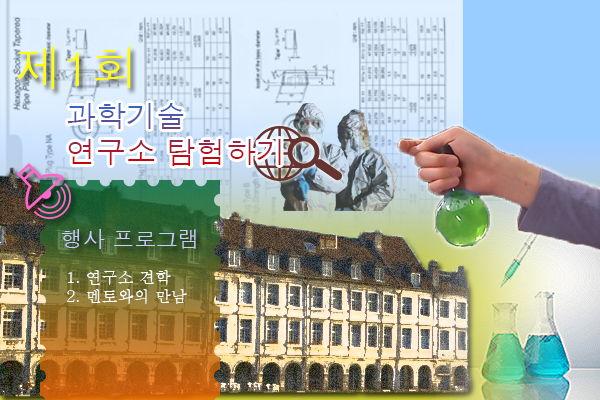
<style>
.page{position:relative;width:600px;height:400px}
.page>*{position:absolute;margin:0}
.t1{font:47.6px "Dotum";color:#ffff00}
.t2{font:29.9px "Dotum"}
.t3{font:21.8px "Dotum";color:#ccccff}
.t4{font:15.8px "Batang";color:#ffffff}
</style>
<div class="page">
<p class="t1" style="left:17px;top:47px;width:114px;height:42px">제1회</p>
<p class="t2" style="left:67px;top:103px;width:214px;height:63px">과학기술<br>연구소 탐험하기</p>
<p class="t3" style="left:62px;top:229px;width:134px;height:20px">행사 프로그램</p>
<p class="t4" style="left:67px;top:270px;width:120px;height:34px">1. 연구소 견학<br>2. 멘토와의 만남</p>
</div>
